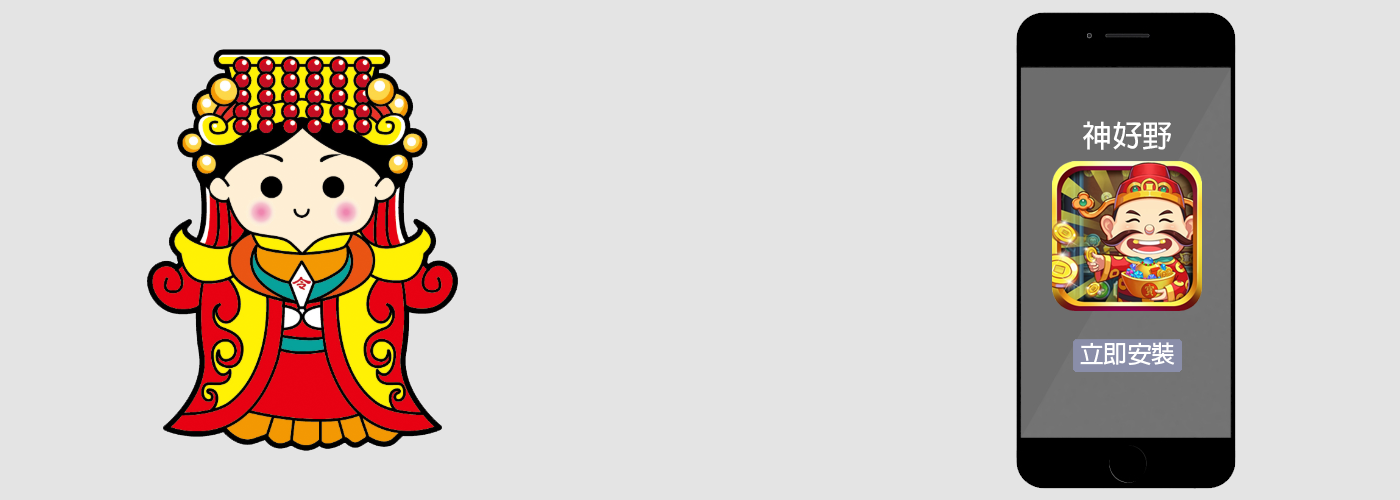
<style>
.page{position:relative;width:1400px;height:500px;background:#e4e4e4}
.page>*{position:absolute;margin:0}
.t1{font:30px "AdobeFanHeitiStd-Bold";color:#ffffff}
.t2{font:24px "AdobeFanHeitiStd-Bold";color:#ffffff}
</style>
<div class="page">
<p class="t1" style="left:1083px;top:121px;width:88px;height:29px">神好野</p>
<p class="t2" style="left:1080px;top:342px;width:95px;height:24px">立即安裝</p>
</div>
